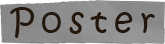
<style>
.page{position:relative;width:165px;height:44px}
.page>*{position:absolute;margin:0}
.t1{font:34px "KristenITC-Regular";letter-spacing:0.2em;color:#24180d}
</style>
<div class="page">
<p class="t1" style="left:10px;top:7px;width:145px;height:31px">Poster</p>
</div>
